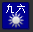
<style>
.page{position:relative;width:33px;height:32px;background:#000090}
.page>*{position:absolute;margin:0}
.t1{font:10.4px "SimSun";color:#ffffff}
</style>
<div class="page">
<p class="t1" style="left:6px;top:4px;width:19px;height:9px">九六</p>
</div>
